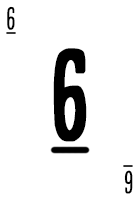
<style>
.page{position:relative;width:140px;height:200px;background:#ffffff}
.page>*{position:absolute;margin:0}
.t1{font:28.7px "CardenioModern-Reg";letter-spacing:-0.1em;color:#000000;text-transform:uppercase;font-weight:bold;scale:0.87 1}
.t2{font:115px "CardenioModern-Bold";letter-spacing:-0.1em;color:#000000;text-transform:uppercase;font-weight:bold;scale:0.87 1}
</style>
<div class="page">
<p class="t1" style="left:7px;top:6px;width:8px;height:24px">6</p>
<p class="t2" style="left:53px;top:48px;width:34px;height:94px">6</p>
<p class="t1" style="left:124px;top:170px;width:9px;height:24px;rotate:180deg">6</p>
</div>
